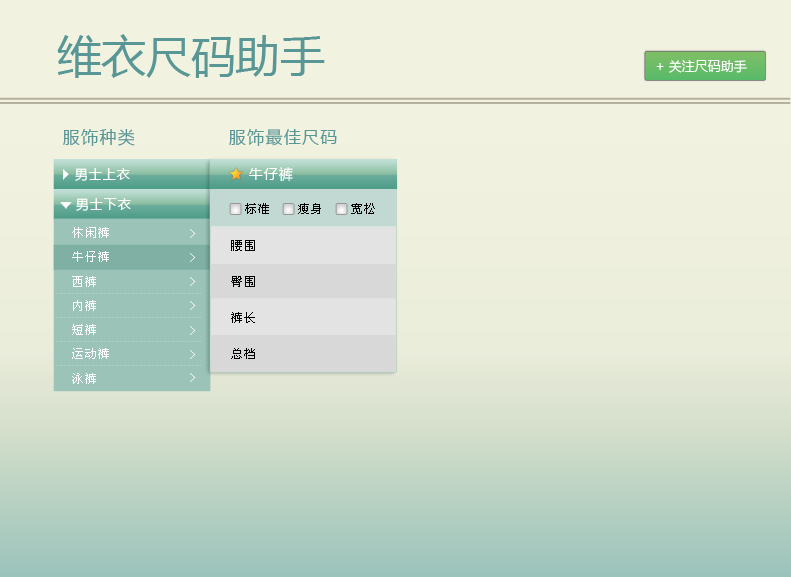
<style>
.page{position:relative;width:791px;height:577px}
.page>*{position:absolute;margin:0}
.t1{font:44.7px "MicrosoftYaHei";color:#599696}
.t2{font:13px "MicrosoftYaHei";color:#ffffff}
.t3{font:17px "MicrosoftYaHei";letter-spacing:0.075em;color:#599696}
.t4{font:13px "MicrosoftYaHei";letter-spacing:0.075em;color:#ffffff}
.t5{font:14px "MicrosoftYaHei";letter-spacing:0.075em;color:#ffffff}
.t6{font:12px "SimSun";letter-spacing:0.075em;color:#000000}
.t7{font:12px/24.3px "SimSun";letter-spacing:0.075em;color:#ffffff}
.t8{font:14px/24.3px "SimSun";letter-spacing:0.075em;color:#ffffff}
.t9{font:14px/23px "SimSun";letter-spacing:0.075em;color:#ffffff}
.t10{font:12px/36px "SimSun";letter-spacing:0.075em;color:#000000}
</style>
<div class="page">
<p class="t1" style="left:57px;top:34px;width:268px;height:44px">维衣尺码助手</p>
<p class="t2" style="left:656px;top:60px;width:91px;height:13px">+ 关注尺码助手</p>
<p class="t3" style="left:63px;top:128px;width:72px;height:18px">服饰种类</p>
<p class="t3" style="left:229px;top:129px;width:108px;height:17px">服饰最佳尺码</p>
<p class="t4" style="left:75px;top:168px;width:55px;height:13px">男士上衣</p>
<p class="t5" style="left:249px;top:167px;width:44px;height:15px">牛仔裤</p>
<p class="t4" style="left:76px;top:198px;width:55px;height:13px">男士下衣</p>
<p class="t6" style="left:245px;top:203px;width:130px;height:11px">标准    瘦身    宽松</p>
<p class="t7" style="left:72px;top:227px;width:37px;height:157px">休闲裤<br>牛仔裤<br>西裤<br>内裤<br>短裤<br>运动裤<br>泳裤</p>
<p class="t8" style="left:189px;top:229px;width:7px;height:153px">&gt;<br>&gt;<br>&gt;<br>&gt;<br>&gt;<br>&gt;<br><span class="t9">&gt;</span></p>
<p class="t10" style="left:231px;top:240px;width:24px;height:119px">腰围<br>臀围<br>裤长<br>总档</p>
</div>
